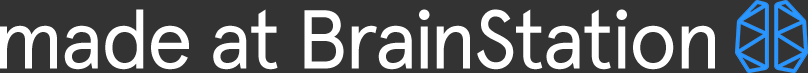
<style>
.page{position:relative;width:808px;height:73px;background:#333333}
.page>*{position:absolute;margin:0}
.t1{font:83.2px "Apercu";letter-spacing:-0.04em;color:#ffffff}
</style>
<div class="page">
<p class="t1" style="left:0px;top:9px;width:715px;height:61px">made at BrainStation</p>
</div>
